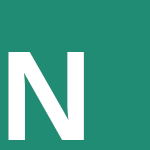
<style>
.page{position:relative;width:150px;height:150px;background:#218c74}
.page>*{position:absolute;margin:0}
.t1{font:128px "Arimo-Bold";color:#ffffff}
</style>
<div class="page">
<p class="t1" style="left:8px;top:52px;width:76px;height:88px">N</p>
</div>
